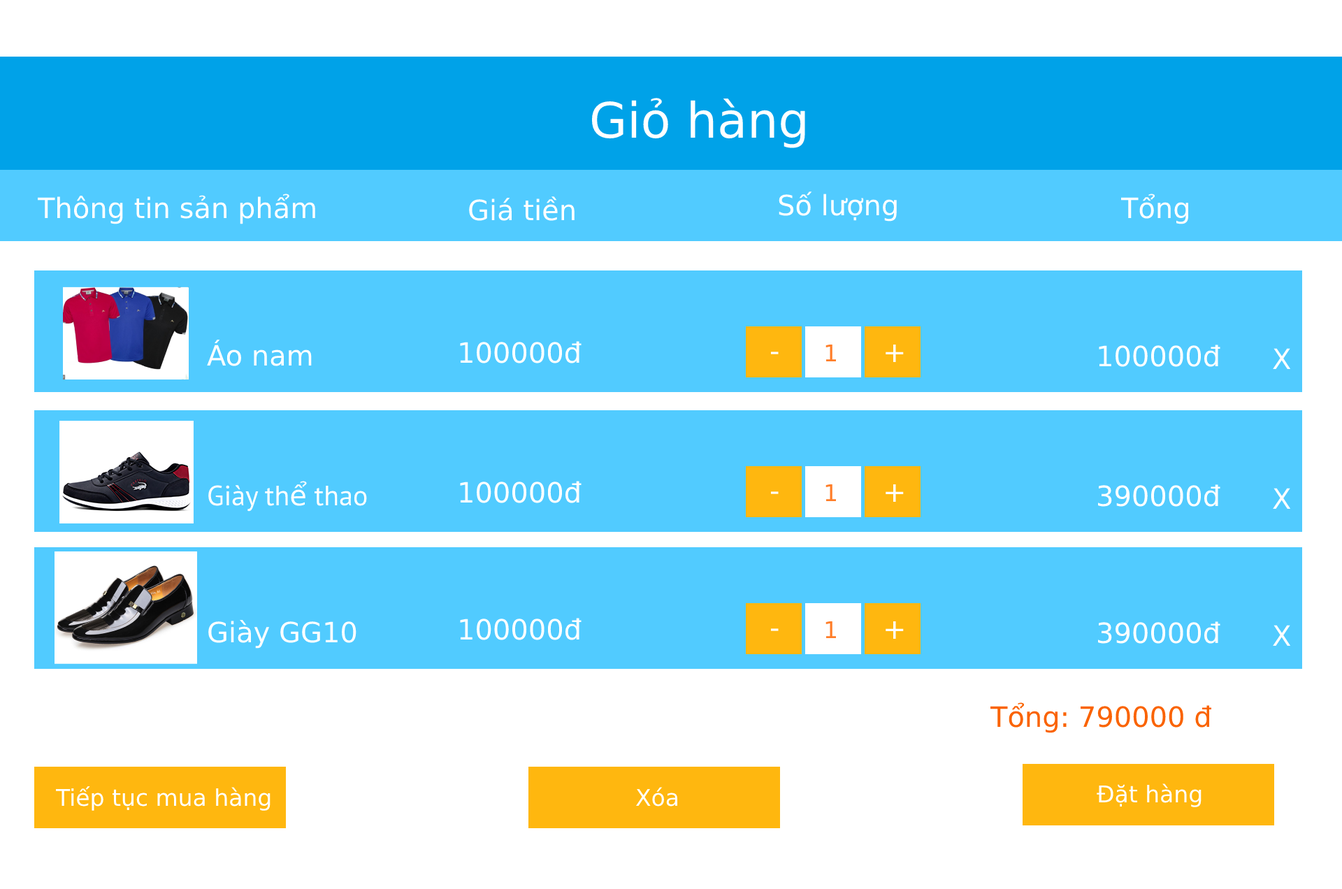
<style>
.page{position:relative;width:1342px;height:889px;background:#ffffff}
.page>*{position:absolute;margin:0}
.t1{font:48.9px "DejaVuSans";color:#ffffff}
.t2{font:28px "DejaVuSans";color:#ffffff}
.t3{font:23.1px "DejaVuSans";color:#ff7e29}
.t4{font:28px "MyriadPro-Regular";color:#ffffff}
.t5{font:28px "DejaVuSans";color:#fa6300}
.t6{font:23.1px "DejaVuSans";color:#ffffff}
</style>
<div class="page">
<p class="t1" style="left:591px;top:98px;width:214px;height:50px">Giỏ hàng</p>
<p class="t2" style="left:37px;top:194px;width:278px;height:30px">Thông tin sản phẩm</p>
<p class="t2" style="left:469px;top:196px;width:105px;height:25px">Giá tiền</p>
<p class="t2" style="left:778px;top:191px;width:118px;height:31px">Số lượng</p>
<p class="t2" style="left:1120px;top:194px;width:69px;height:30px">Tổng</p>
<p class="t2" style="left:207px;top:339px;width:105px;height:27px">Áo nam</p>
<p class="t2" style="left:460px;top:341px;width:121px;height:22px">100000đ</p>
<p class="t2" style="left:770px;top:351px;width:8px;height:3px">-</p>
<p class="t3" style="left:825px;top:344px;width:11px;height:17px">1</p>
<p class="t2" style="left:885px;top:344px;width:18px;height:18px">+</p>
<p class="t2" style="left:1098px;top:344px;width:122px;height:23px">100000đ</p>
<p class="t2" style="left:1272px;top:348px;width:19px;height:21px">X</p>
<p class="t4" style="left:208px;top:481px;width:159px;height:30px">Giày thể thao</p>
<p class="t2" style="left:460px;top:481px;width:121px;height:22px">100000đ</p>
<p class="t3" style="left:825px;top:484px;width:11px;height:17px">1</p>
<p class="t2" style="left:885px;top:484px;width:18px;height:18px">+</p>
<p class="t2" style="left:1098px;top:484px;width:122px;height:23px">390000đ</p>
<p class="t2" style="left:770px;top:491px;width:8px;height:3px">-</p>
<p class="t2" style="left:1272px;top:488px;width:19px;height:21px">X</p>
<p class="t2" style="left:460px;top:618px;width:121px;height:22px">100000đ</p>
<p class="t2" style="left:208px;top:620px;width:148px;height:28px">Giày GG10</p>
<p class="t2" style="left:770px;top:628px;width:8px;height:3px">-</p>
<p class="t3" style="left:825px;top:620px;width:11px;height:18px">1</p>
<p class="t2" style="left:885px;top:620px;width:18px;height:19px">+</p>
<p class="t2" style="left:1098px;top:621px;width:122px;height:23px">390000đ</p>
<p class="t2" style="left:1272px;top:625px;width:19px;height:21px">X</p>
<p class="t5" style="left:989px;top:702px;width:223px;height:31px">Tổng: 790000 đ</p>
<p class="t6" style="left:1096px;top:783px;width:105px;height:24px">Đặt hàng</p>
<p class="t6" style="left:55px;top:786px;width:215px;height:25px">Tiếp tục mua hàng</p>
<p class="t6" style="left:635px;top:787px;width:43px;height:19px">Xóa</p>
</div>
